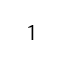
<style>
.page{position:relative;width:64px;height:64px;background:#ffffff}
.page>*{position:absolute;margin:0}
.t1{font:24px "Inconsolata-Regular";letter-spacing:-0.04em;color:#000000}
</style>
<div class="page">
<p class="t1" style="left:28px;top:25px;width:6px;height:15px">1</p>
</div>
